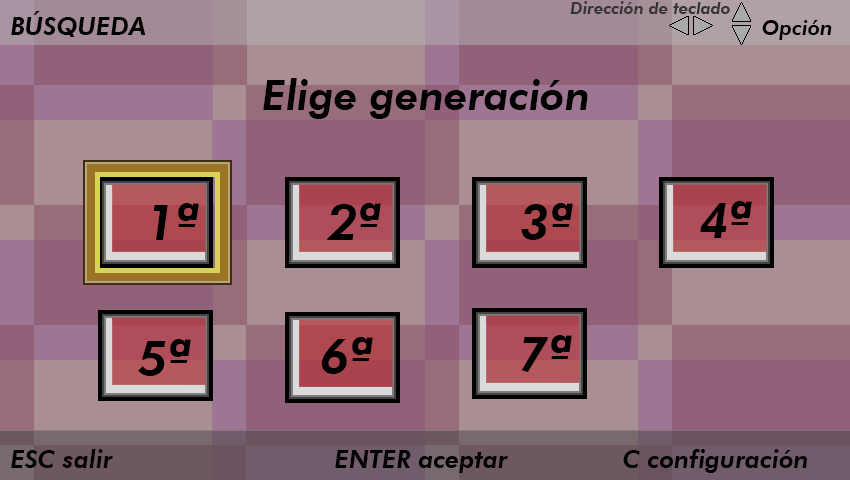
<style>
.page{position:relative;width:850px;height:480px}
.page>*{position:absolute;margin:0}
.t1{font:16.7px "FuturaBT-HeavyItalic";color:#343434}
.t2{font:25px "FuturaBT-HeavyItalic";color:#000000}
.t3{font:20.8px "FuturaBT-HeavyItalic";color:#000000}
.t4{font:41.7px "FuturaBT-HeavyItalic";color:#000000}
.t5{font:50px "FuturaBT-HeavyItalic";color:#000000}
</style>
<div class="page">
<p class="t1" style="left:570px;top:1px;width:160px;height:13px">Dirección de teclado</p>
<p class="t2" style="left:11px;top:11px;width:135px;height:26px">BÚSQUEDA</p>
<p class="t3" style="left:762px;top:20px;width:70px;height:20px">Opción</p>
<p class="t4" style="left:263px;top:78px;width:325px;height:41px">Elige generación</p>
<p class="t5" style="left:153px;top:203px;width:46px;height:37px">1ª</p>
<p class="t5" style="left:326px;top:203px;width:55px;height:37px">2ª</p>
<p class="t5" style="left:521px;top:203px;width:52px;height:37px">3ª</p>
<p class="t5" style="left:700px;top:201px;width:52px;height:37px">4ª</p>
<p class="t5" style="left:138px;top:339px;width:53px;height:37px">5ª</p>
<p class="t5" style="left:321px;top:337px;width:52px;height:37px">6ª</p>
<p class="t5" style="left:521px;top:335px;width:51px;height:37px">7ª</p>
<p class="t2" style="left:11px;top:449px;width:796px;height:24px">ESC salir         ENTER aceptar      C configuración</p>
</div>
